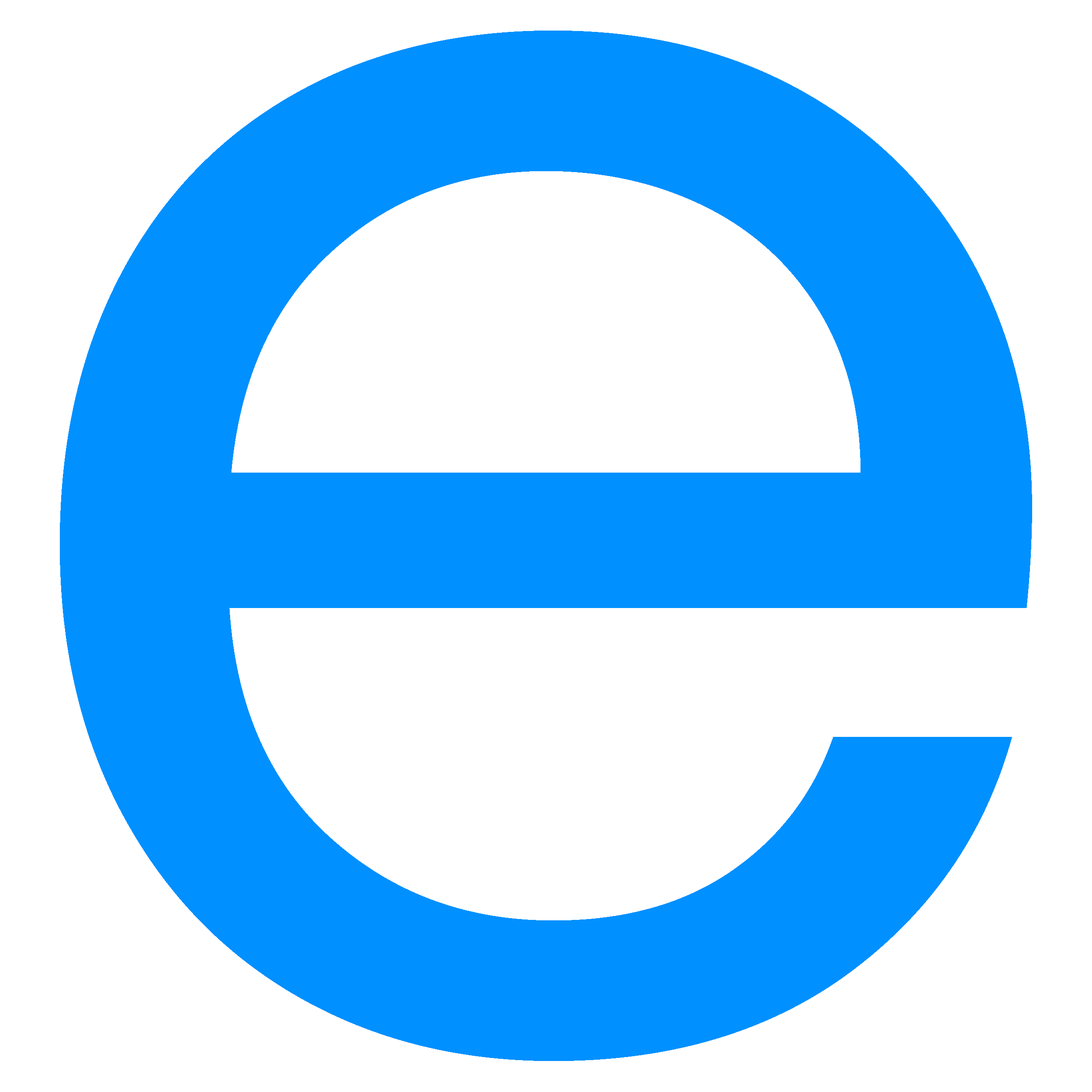
<style>
.page{position:relative;width:1092px;height:1092px;background:#ffffff}
.page>*{position:absolute;margin:0}
.t1{font:1820px "Poppins-Regular";color:#0090ff}
</style>
<div class="page">
<p class="t1" style="left:60px;top:31px;width:972px;height:1030px">e</p>
</div>
